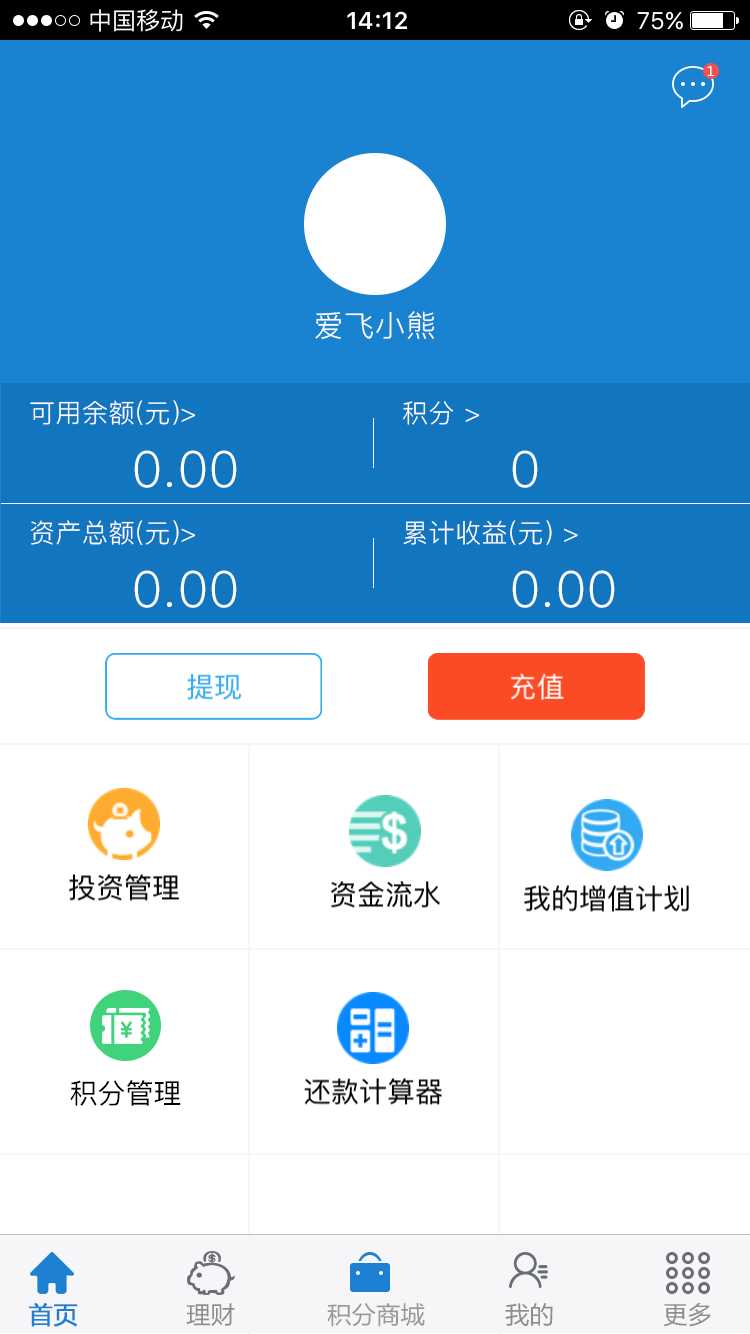
<style>
.page{position:relative;width:750px;height:1334px;background:#ffffff}
.page>*{position:absolute;margin:0}
.t1{font:13px "MicrosoftYaHei";letter-spacing:0.2em;color:#ffffff}
.t2{font:30px "PingFang-SC-Regular";letter-spacing:0.025em;color:#fefefe}
.t3{font:26px "PingFang-SC-Regular";letter-spacing:0.025em;color:#fefefe}
.t4{font:50px "PingFang-SC-Regular";letter-spacing:0.025em;color:#fefefe}
.t5{font:28px "PingFang-SC-Medium";color:#000000}
.t6{font:24px "MicrosoftYaHei";letter-spacing:0.025em;color:#1d80d3;font-weight:bold}
.t7{font:24px "MicrosoftYaHei";letter-spacing:0.025em;color:#8d8d8d}
.t8{font:24px "MicrosoftYaHei";letter-spacing:0.025em;color:#999999}
</style>
<div class="page">
<p class="t1" style="left:707px;top:66px;width:7px;height:10px">1</p>
<p class="t2" style="left:315px;top:311px;width:120px;height:28px">爱飞小熊</p>
<p class="t3" style="left:30px;top:400px;width:166px;height:25px">可用余额(元)&gt;</p>
<p class="t3" style="left:403px;top:401px;width:77px;height:24px">积分 &gt;</p>
<p class="t4" style="left:134px;top:450px;width:103px;height:38px">0.00</p>
<p class="t4" style="left:512px;top:450px;width:26px;height:38px">0</p>
<p class="t3" style="left:30px;top:520px;width:166px;height:25px">资产总额(元)&gt;</p>
<p class="t3" style="left:403px;top:520px;width:175px;height:25px">累计收益(元) &gt;</p>
<p class="t4" style="left:134px;top:570px;width:103px;height:38px">0.00</p>
<p class="t4" style="left:512px;top:570px;width:103px;height:38px">0.00</p>
<p class="t5" style="left:70px;top:1080px;width:111px;height:26px">积分管理</p>
<p class="t6" style="left:29px;top:1303px;width:49px;height:24px">首页</p>
<p class="t7" style="left:186px;top:1303px;width:49px;height:23px">理财</p>
<p class="t8" style="left:327px;top:1303px;width:98px;height:24px">积分商城</p>
<p class="t7" style="left:505px;top:1303px;width:48px;height:23px">我的</p>
<p class="t7" style="left:663px;top:1303px;width:48px;height:24px">更多</p>
</div>
